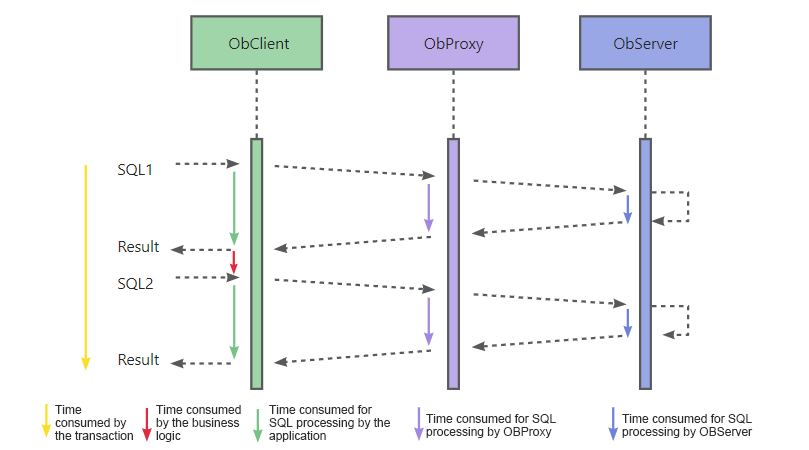
<style>
.page{position:relative;width:809px;height:450px;background:#ffffff}
.page>*{position:absolute;margin:0}
.t1{font:12px/13px "ArialMT";color:#2e2d2d}
</style>
<div class="page">
<p class="t1" style="left:55px;top:405px;width:78px;height:35px">Time consumed by the transaction</p>
<p class="t1" style="left:156px;top:405px;width:85px;height:37px">Time consumed by the business logic</p>
<p class="t1" style="left:269px;top:405px;width:121px;height:37px">Time consumed for SQL processing by the application</p>
<p class="t1" style="left:426px;top:414px;width:130px;height:24px">Time consumed for SQL processing by OBProxy</p>
<p class="t1" style="left:622px;top:414px;width:131px;height:24px">Time consumed for SQL processing by OBServer</p>
</div>
